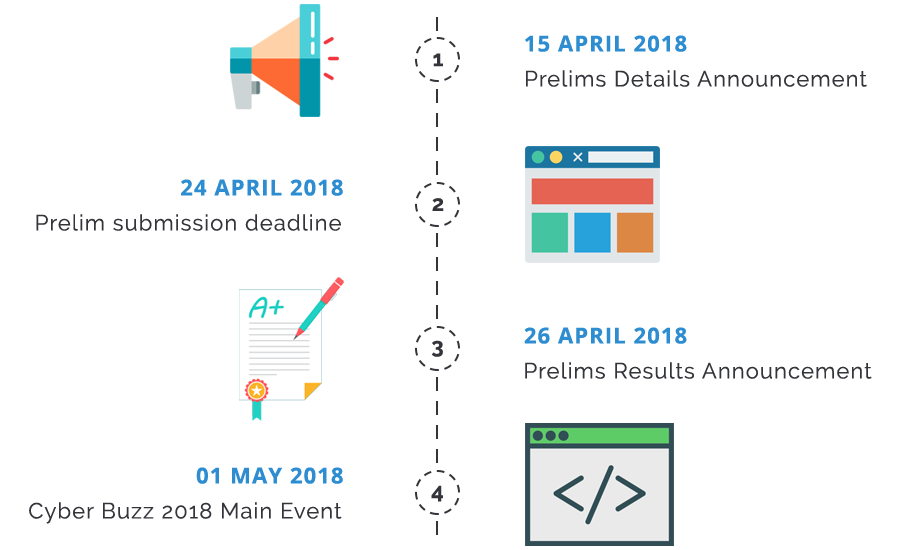
<style>
.page{position:relative;width:900px;height:550px;background:#ffffff}
.page>*{position:absolute;margin:0}
.t1{font:22px "OpenSans-Bold";letter-spacing:0.05em;color:#2e8dd1}
.t2{font:22px "Raleway-Bold";letter-spacing:0.05em;color:#34353a}
.t3{font:22px "Raleway-Regular";letter-spacing:0.05em;color:#34353a}
</style>
<div class="page">
<p class="t1" style="left:525px;top:35px;width:162px;height:17px">15 APRIL 2018</p>
<p class="t2" style="left:433px;top:53px;width:10px;height:14px">1</p>
<p class="t3" style="left:526px;top:70px;width:341px;height:17px">Prelims Details Announcement</p>
<p class="t1" style="left:181px;top:179px;width:162px;height:17px">24 APRIL 2018</p>
<p class="t2" style="left:432px;top:198px;width:12px;height:13px">2</p>
<p class="t3" style="left:36px;top:214px;width:305px;height:17px">Prelim submission deadline</p>
<p class="t1" style="left:524px;top:327px;width:163px;height:17px">26 APRIL 2018</p>
<p class="t2" style="left:431px;top:340px;width:12px;height:17px">3</p>
<p class="t3" style="left:525px;top:362px;width:347px;height:17px">Prelims Results Announcement</p>
<p class="t1" style="left:196px;top:467px;width:147px;height:17px">01 MAY 2018</p>
<p class="t2" style="left:431px;top:485px;width:12px;height:17px">4</p>
<p class="t3" style="left:29px;top:502px;width:313px;height:22px">Cyber Buzz 2018 Main Event</p>
</div>
